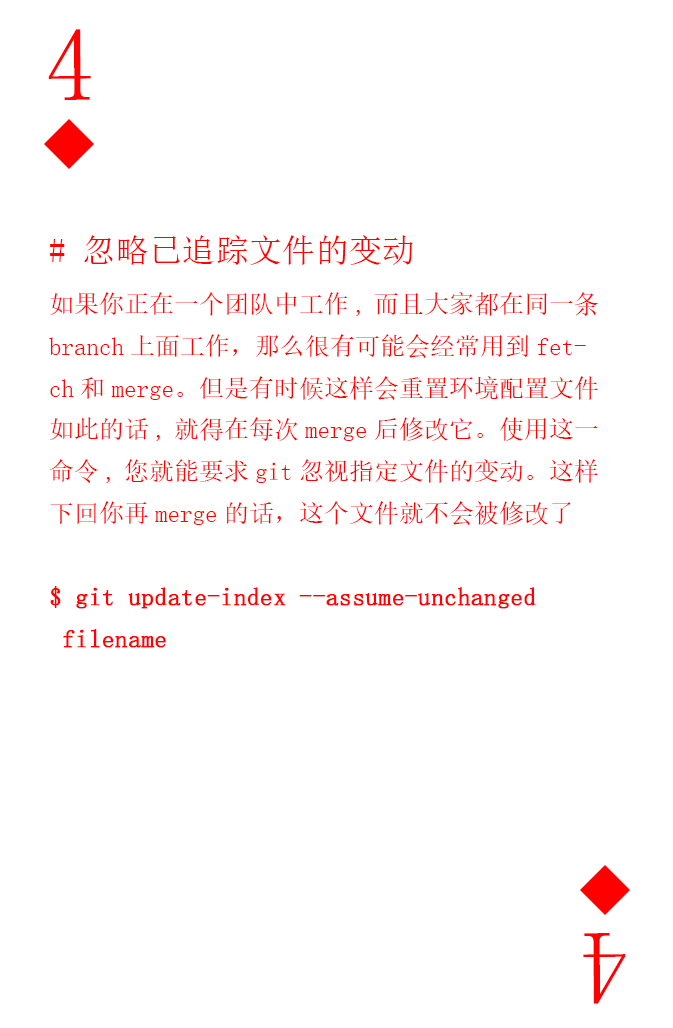
<style>
.page{position:relative;width:673px;height:1028px;background:#ffffff}
.page>*{position:absolute;margin:0}
.t1{font:104.2px "SimSun-ExtB";color:#ff0101;scale:0.93 1}
.t2{font:25px/41.7px "SimSun";color:#ff0101}
.t3{font:33.3px "SimSun";color:#ff0101}
.t4{font:25px/41.7px "SimSun";color:#ff0101;font-weight:bold}
</style>
<div class="page">
<p class="t1" style="left:48px;top:29px;width:43px;height:71px">4</p>
<p class="t2" style="left:49px;top:235px;width:549px;height:413px"><span class="t3"># 忽略已追踪文件的变动<br></span>如果你正在一个团队中工作,而且大家都在同一条<br>branch上面工作，那么很有可能会经常用到fet-<br>ch和merge。但是有时候这样会重置环境配置文件<br>如此的话,就得在每次merge后修改它。使用这一<br>命令,您就能要求git忽视指定文件的变动。这样<br>下回你再merge的话，这个文件就不会被修改了<br><span class="t4"><br>$ git update-index --assume-unchanged<br> filename</span></p>
<p class="t1" style="left:583px;top:933px;width:43px;height:71px;rotate:180deg">4</p>
</div>
